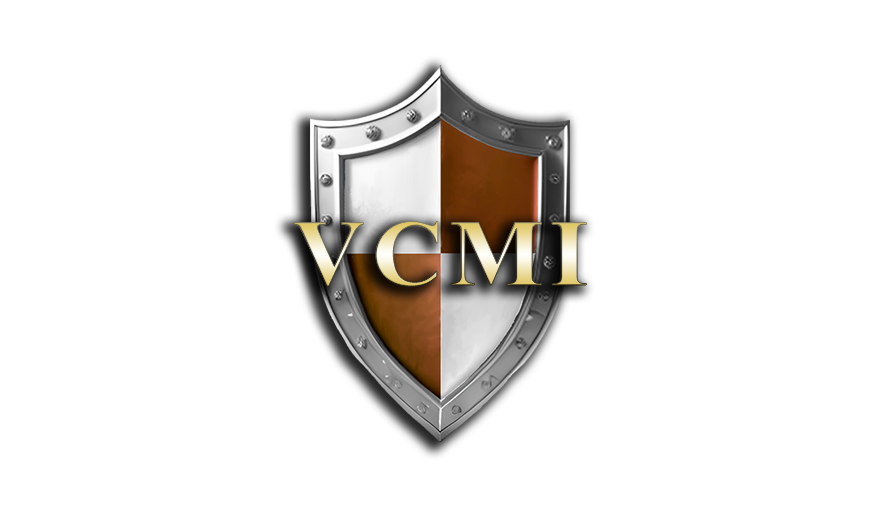
<style>
.page{position:relative;width:880px;height:508px;background:#ffffff}
.page>*{position:absolute;margin:0}
.t1{font:94px "TimesNewRomanPS-BoldMT";letter-spacing:0.07em;scale:1.05 1}
</style>
<div class="page">
<p class="t1" style="left:294px;top:221px;width:293px;height:66px">VCMI</p>
</div>
